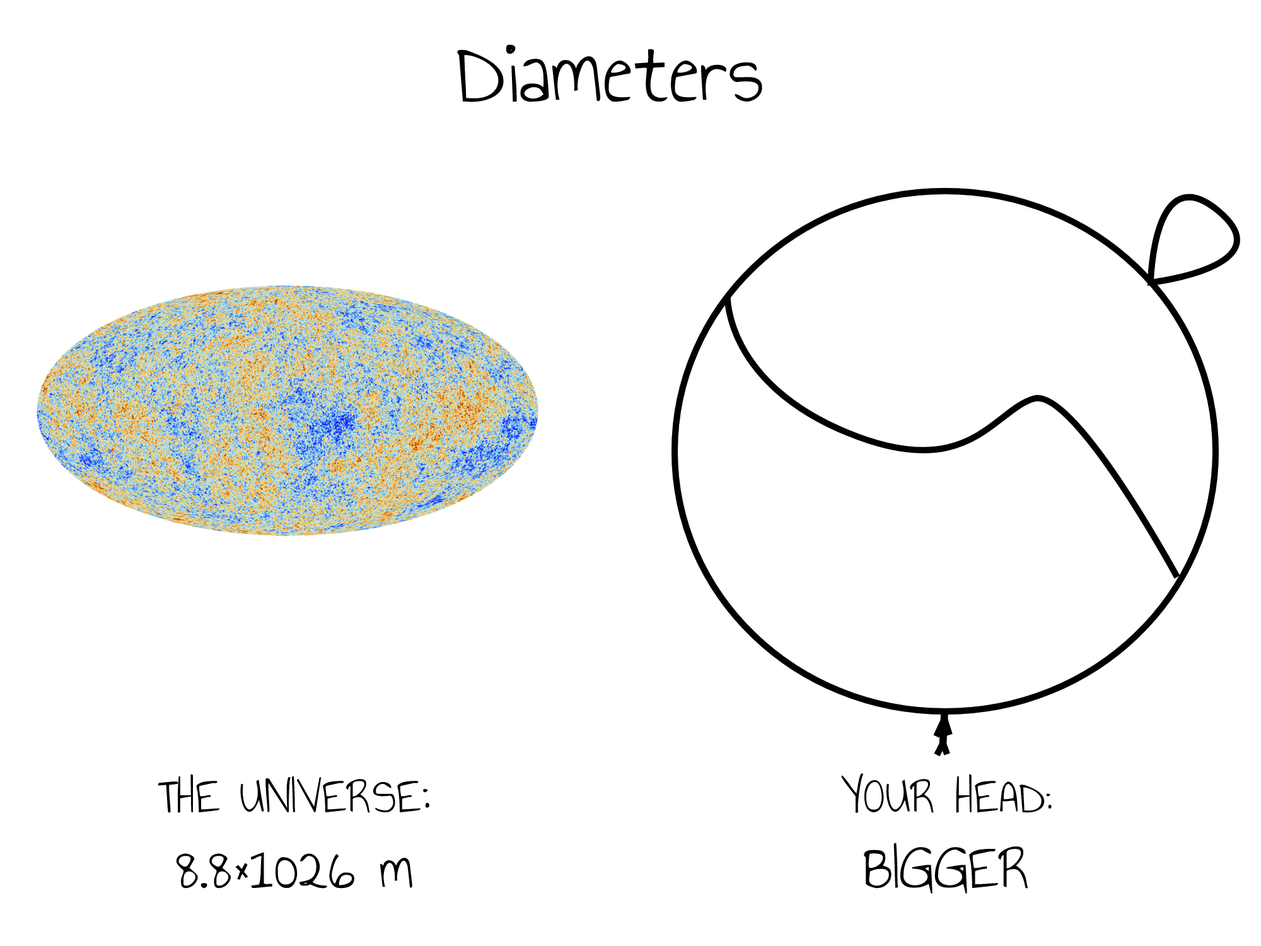
<style>
.page{position:relative;width:1261px;height:946px;background:#ffffff}
.page>*{position:absolute;margin:0}
.t1{font:94.6px "AnnieUseYourTelescope-Regular";color:#000000}
.t2{font:50.4px "AnnieUseYourTelescope-Regular";color:#000000}
.t3{font:63px "AnnieUseYourTelescope-Regular";color:#000000}
</style>
<div class="page">
<p class="t1" style="left:457px;top:44px;width:306px;height:58px">Diameters</p>
<p class="t2" style="left:158px;top:774px;width:271px;height:114px;text-align:center">THE UNIVERSE<span class="t3">:<br>8.8×1026 m</span></p>
<p class="t2" style="left:841px;top:773px;width:211px;height:120px;text-align:center">YOUR HEAD:<br><span class="t3">BIGGER</span></p>
</div>
